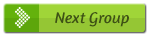
<style>
.page{position:relative;width:149px;height:36px;background:#95c634}
.page>*{position:absolute;margin:0}
.t1{font:16px "Amaranth-Italic";color:#3e5215}
</style>
<div class="page">
<p class="t1" style="left:55px;top:12px;width:74px;height:15px">Next Group</p>
</div>
